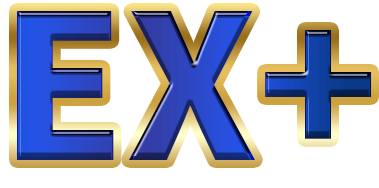
<style>
.page{position:relative;width:379px;height:188px;background:#ffffff}
.page>*{position:absolute;margin:0}
.t1{font:200px "SourceHanSans-Heavy"}
</style>
<div class="page">
<p class="t1" style="left:17px;top:11px;width:355px;height:149px">EX+</p>
</div>
